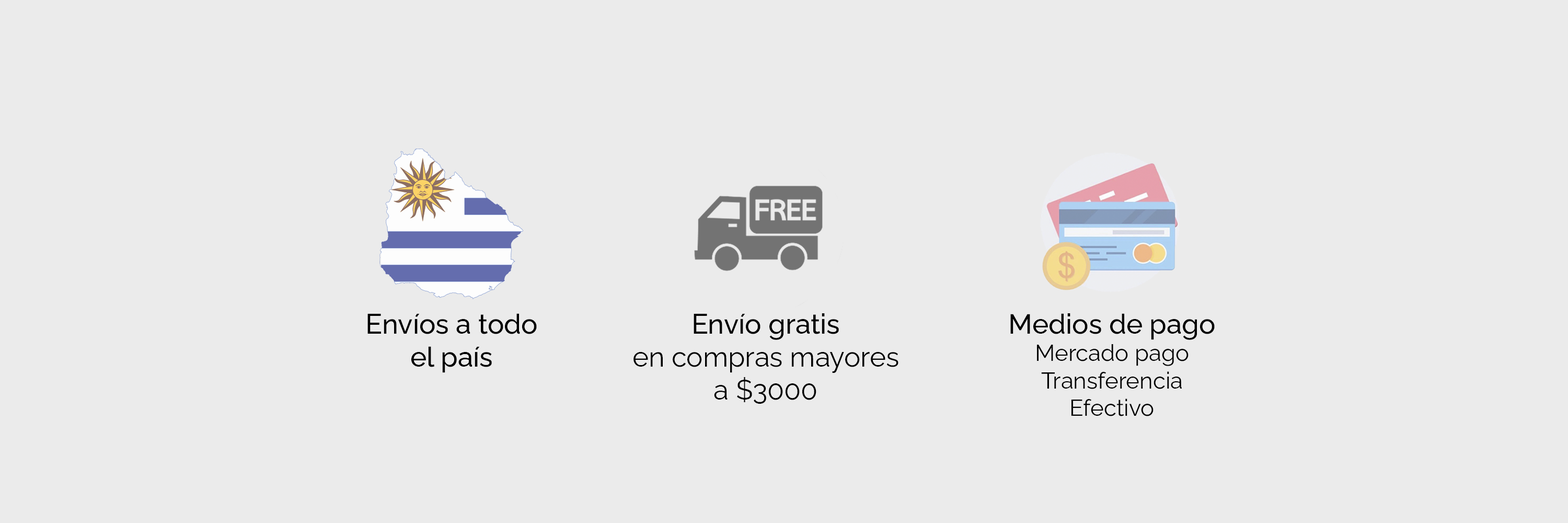
<style>
.page{position:relative;width:1568px;height:523px;background:#ebebeb}
.page>*{position:absolute;margin:0}
.t1{font:27.5px "Raleway-Medium";color:#000000}
.t2{font:27.5px "Raleway-Regular";color:#000000}
.t3{font:22.9px "Raleway-Regular";color:#000000}
</style>
<div class="page">
<p class="t1" style="left:367px;top:313px;width:170px;height:60px;text-align:center">Envíos a todo<br>el país</p>
<p class="t2" style="left:633px;top:313px;width:265px;height:90px;text-align:center"><span class="t1">Envío gratis<br></span>en compras mayores<br>a $3000</p>
<p class="t3" style="left:1010px;top:313px;width:205px;height:103px;text-align:center"><span class="t1">Medios de pago<br></span>Mercado pago<br>Transferencia<br>Efectivo</p>
</div>
